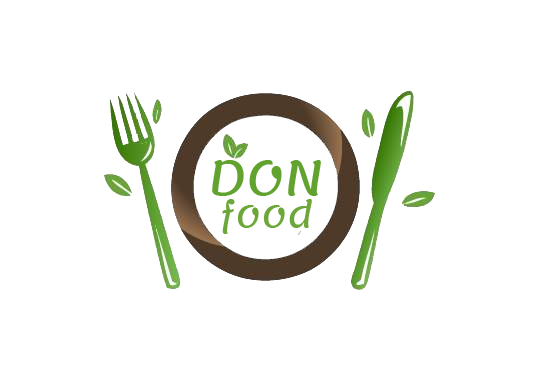
<style>
.page{position:relative;width:534px;height:383px;background:#ffffff}
.page>*{position:absolute;margin:0}
.t1{font:48px "Lemonada-Regular";letter-spacing:0.01em;color:#62a330}
.t2{font:36px "Lemonada-Regular";letter-spacing:0.01em;color:#6da73a}
</style>
<div class="page">
<p class="t1" style="left:212px;top:160px;width:109px;height:36px">DON</p>
<p class="t2" style="left:222px;top:199px;width:90px;height:35px">food</p>
</div>
